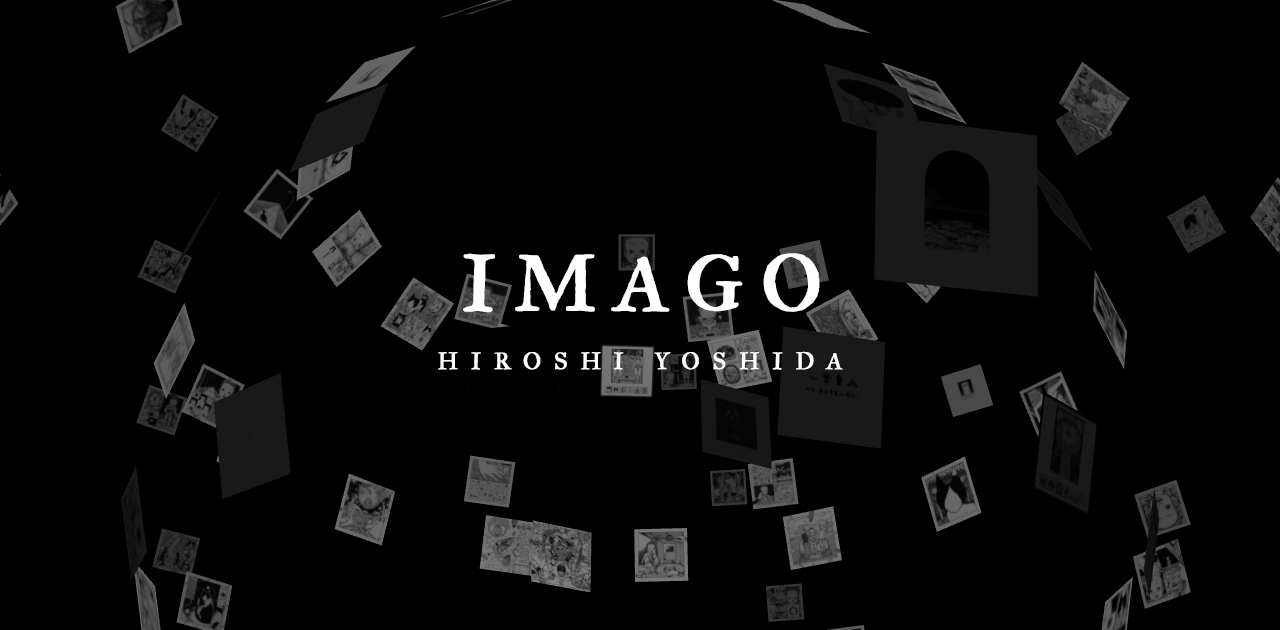
<style>
.page{position:relative;width:1280px;height:630px;background:#000000}
.page>*{position:absolute;margin:0}
.t1{font:80px "IM_FELL_Great_Primer_Roman";letter-spacing:0.2em;color:#ffffff;font-weight:bold}
.t2{font:24px "IM_FELL_Great_Primer_Roman";letter-spacing:0.5em;color:#ffffff;text-transform:uppercase;font-weight:bold}
</style>
<div class="page">
<p class="t1" style="left:463px;top:253px;width:357px;height:60px">IMAGO</p>
<p class="t2" style="left:438px;top:351px;width:405px;height:19px">hiroshi yoshida</p>
</div>
